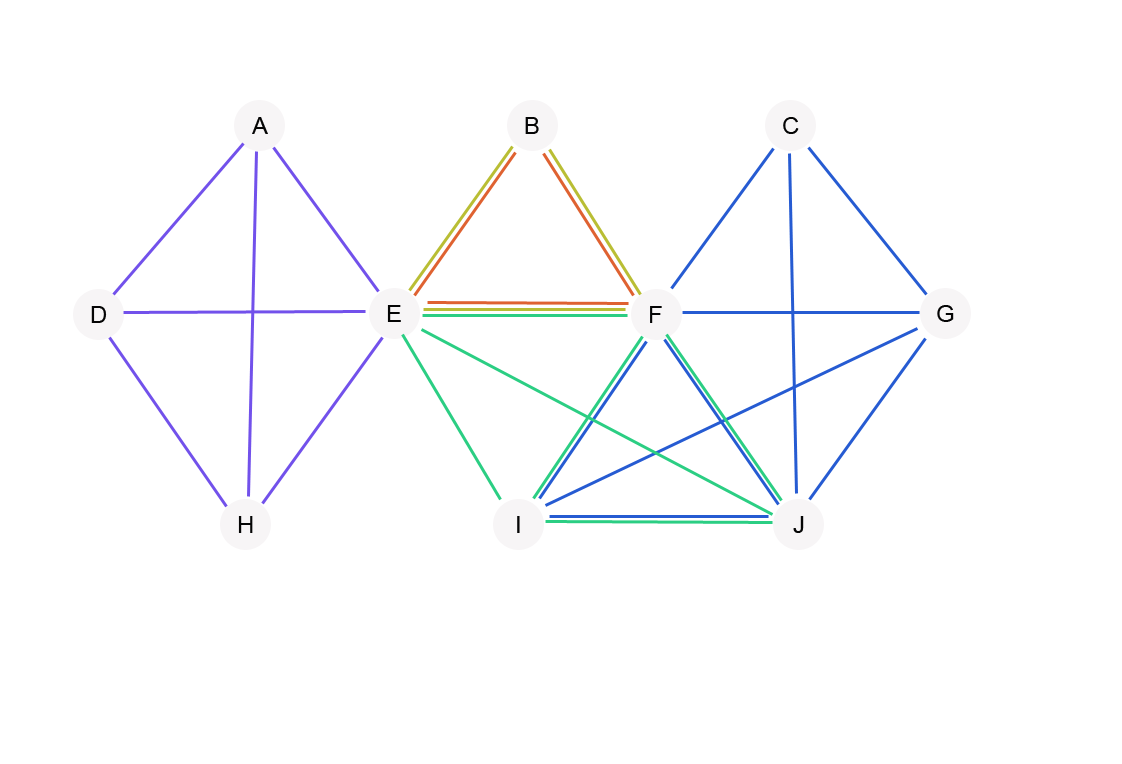
<style>
.page{position:relative;width:1122px;height:764px;background:#ffffff}
.page>*{position:absolute;margin:0}
.t1{font:24px "ArialMT";color:#050505}
</style>
<div class="page">
<p class="t1" style="left:525px;top:117px;width:14px;height:17px">B</p>
<p class="t1" style="left:783px;top:117px;width:16px;height:17px">C</p>
<p class="t1" style="left:387px;top:305px;width:14px;height:17px">E</p>
<p class="t1" style="left:937px;top:305px;width:17px;height:17px">G</p>
<p class="t1" style="left:91px;top:306px;width:16px;height:17px">D</p>
<p class="t1" style="left:650px;top:306px;width:12px;height:17px">F</p>
<p class="t1" style="left:238px;top:516px;width:15px;height:17px">H</p>
<p class="t1" style="left:517px;top:516px;width:3px;height:17px">I</p>
<p class="t1" style="left:793px;top:516px;width:11px;height:17px">J</p>
</div>
